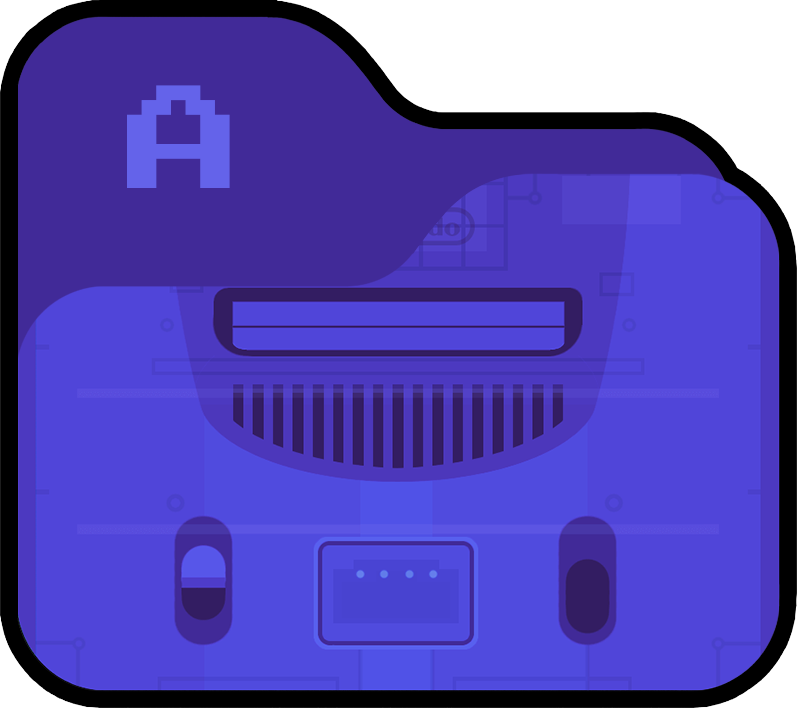
<style>
.page{position:relative;width:797px;height:708px;background:#5045d9}
.page>*{position:absolute;margin:0}
.t1{font:150px "PixelEmulator";color:#6463ea}
</style>
<div class="page">
<p class="t1" style="left:127px;top:85px;width:103px;height:103px">A</p>
</div>
